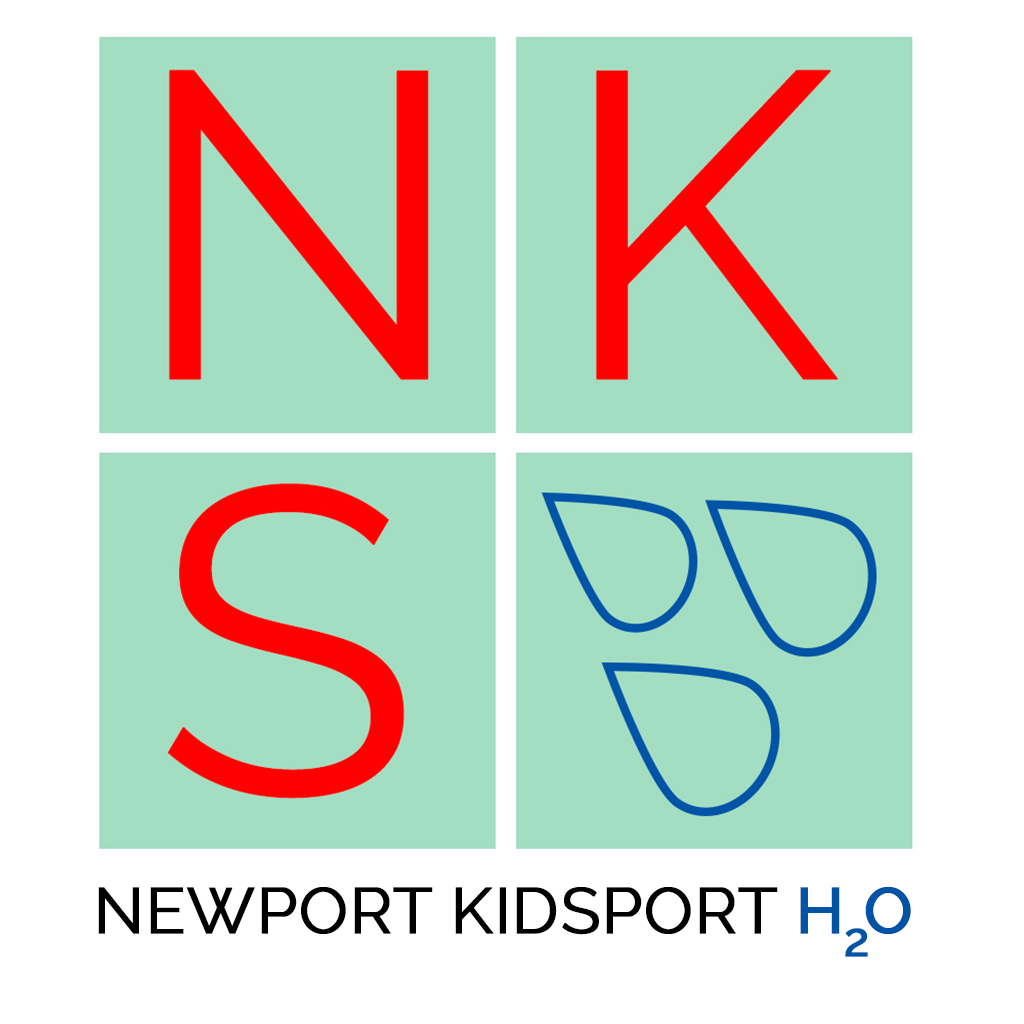
<style>
.page{position:relative;width:1024px;height:1024px;background:#a3dec2}
.page>*{position:absolute;margin:0}
.t1{font:64.5px "Raleway";color:#000000;text-transform:uppercase;font-weight:bold}
.t2{font:64.5px "Raleway-Medium";color:#0153a5;text-transform:uppercase;font-weight:bold}
.t3{font:47.9px "Raleway-Medium";color:#0254a6;text-transform:uppercase;font-weight:bold}
</style>
<div class="page">
<p class="t1" style="left:98px;top:887px;width:813px;height:48px">newport kidsport <span class="t2">h o</span></p>
<p class="t3" style="left:845px;top:928px;width:23px;height:29px">2</p>
</div>
